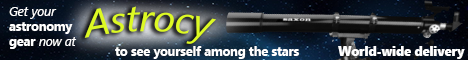
<style>
.page{position:relative;width:468px;height:60px}
.page>*{position:absolute;margin:0}
.t1{font:37.5px "SegoeUI-Italic";color:#ddf924}
.t2{font:12.5px "SegoeUI-Bold";color:#ffffff}
.t3{font:12.5px "SegoeUI-Italic";color:#ffffff}
.t4{font:12.5px "SegoeUIBlack";color:#ffffff}
</style>
<div class="page">
<p class="t1" style="left:84px;top:6px;width:132px;height:38px">Astrocy</p>
<p class="t2" style="left:9px;top:7px;width:68px;height:42px"><span class="t3">Get your <br></span>astronomy <br>gear <span class="t3">now at</span></p>
<p class="t2" style="left:115px;top:46px;width:184px;height:13px">to see yourself among the stars</p>
<p class="t4" style="left:338px;top:46px;width:127px;height:13px">World-wide delivery</p>
</div>
